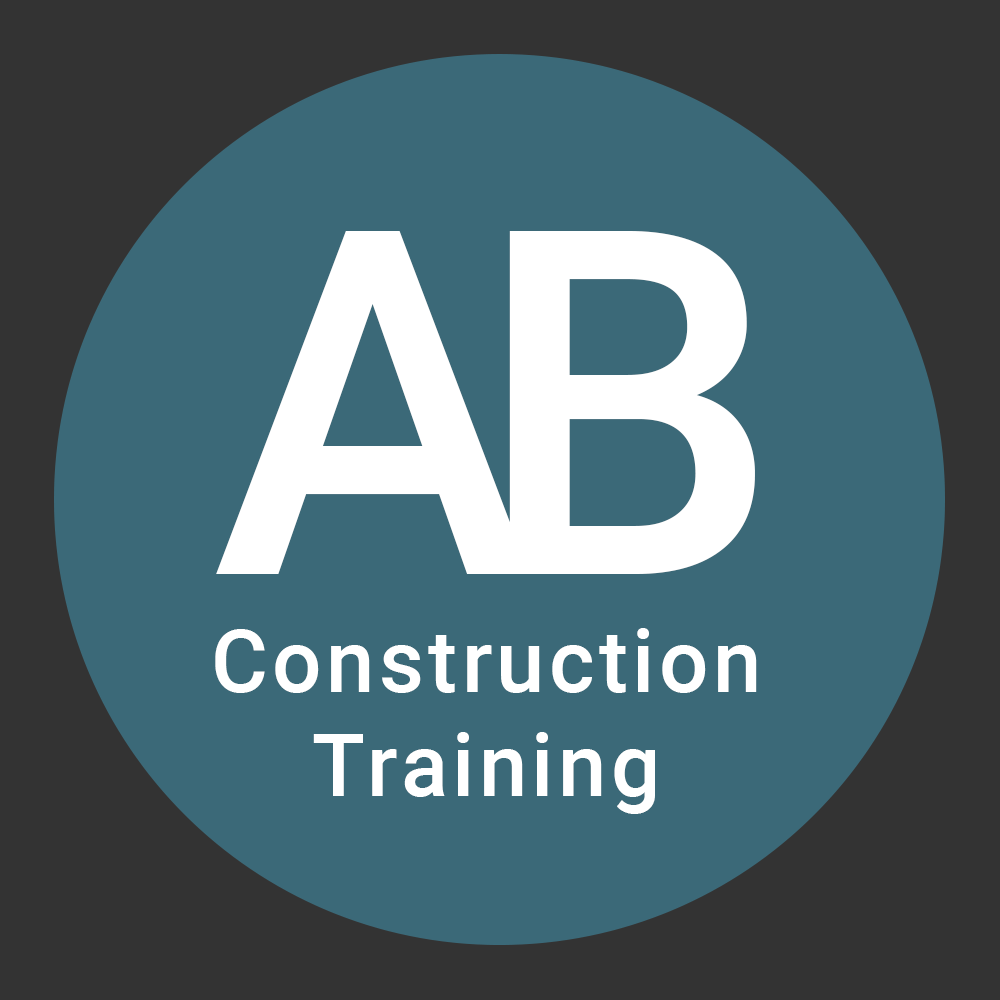
<style>
.page{position:relative;width:1000px;height:1000px;background:#3b6978}
.page>*{position:absolute;margin:0}
.t1{font:483px "Roboto-Medium";letter-spacing:-0.12em;color:#ffffff}
.t2{font:87px "Roboto-Medium";letter-spacing:0.05em;color:#ffffff}
</style>
<div class="page">
<p class="t1" style="left:216px;top:231px;width:539px;height:343px">AB</p>
<p class="t2" style="left:215px;top:628px;width:542px;height:186px;text-align:center">Construction<br>Training</p>
</div>
